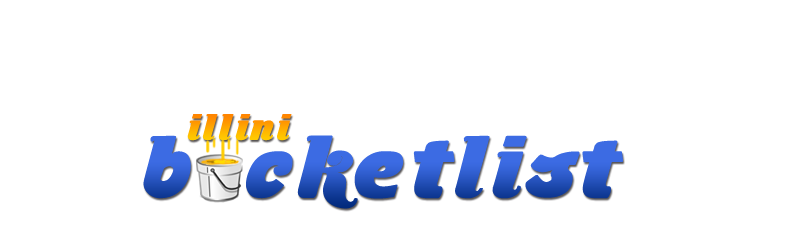
<style>
.page{position:relative;width:800px;height:240px;background:#ffffff}
.page>*{position:absolute;margin:0}
.t1{font:36px "Musa-Ornata";letter-spacing:0.1em}
.t2{font:86px "Musa-Ornata";letter-spacing:0.065em}
</style>
<div class="page">
<p class="t1" style="left:187px;top:114px;width:105px;height:27px">illini</p>
<p class="t2" style="left:143px;top:135px;width:480px;height:74px">b cketlist</p>
</div>
